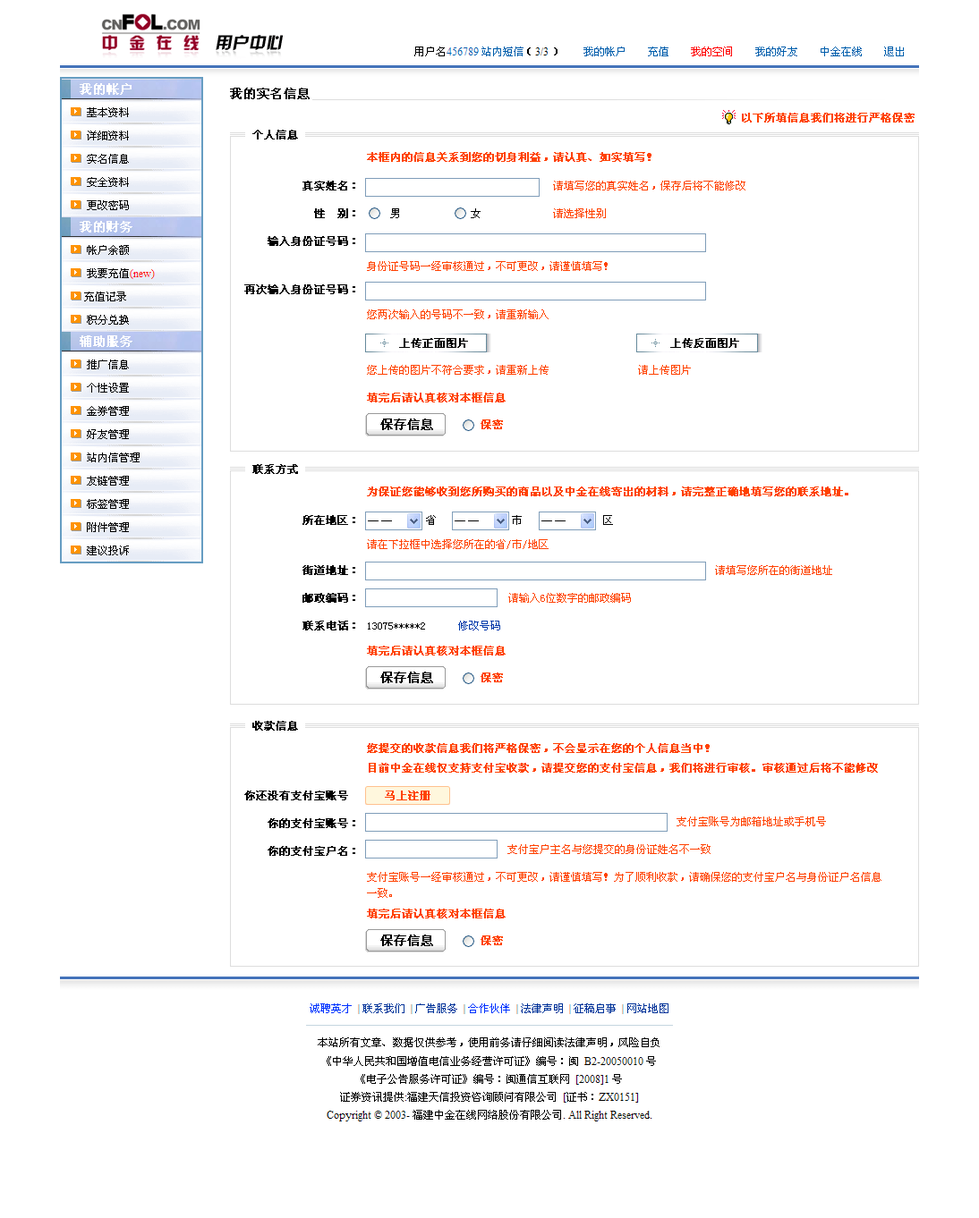
<style>
.page{position:relative;width:979px;height:1218px;background:#ffffff}
.page>*{position:absolute;margin:0}
.t1{font:12.5px "SimSun";color:#000000;font-weight:bold}
.t2{font:10.7px "SimSun";color:#ff4200;font-weight:bold}
.t3{font:10.7px "SimSun";color:#000000;font-weight:bold}
.t4{font:10.7px "SimSun";color:#000000}
.t5{font:10.7px/27.7px "SimSun";color:#000000;font-weight:bold}
.t6{font:10.7px "SimSun";color:#ff4200}
.t7{font:10.7px/27.7px "SimSun";color:#000000}
.t8{font:10.7px/27.7px "SimSun";color:#0038a9}
.t9{font:10.7px/16.1px "SimSun";color:#ff4200}
</style>
<div class="page">
<p class="t1" style="left:230px;top:88px;width:80px;height:11px">我的实名信息</p>
<p class="t2" style="left:742px;top:113px;width:172px;height:10px">以下所填信息我们将进行严格保密</p>
<p class="t3" style="left:252px;top:130px;width:46px;height:10px">个人信息</p>
<p class="t4" style="left:87px;top:154px;width:42px;height:10px">实名信息</p>
<p class="t2" style="left:367px;top:152px;width:284px;height:10px">本框内的信息关系到您的切身利益，请认真、如实填写！</p>
<p class="t5" style="left:267px;top:181px;width:88px;height:65px;text-align:right">真实姓名：<br>性　别：<br>输入身份证号码：</p>
<p class="t6" style="left:553px;top:181px;width:192px;height:10px">请填写您的真实姓名，保存后将不能修改</p>
<p class="t4" style="left:390px;top:208px;width:90px;height:10px">男             女</p>
<p class="t6" style="left:553px;top:208px;width:53px;height:10px">请选择性别</p>
<p class="t6" style="left:367px;top:261px;width:240px;height:10px">身份证号码一经审核通过，不可更改，请谨慎填写！</p>
<p class="t3" style="left:244px;top:284px;width:111px;height:10px">再次输入身份证号码：</p>
<p class="t6" style="left:367px;top:310px;width:181px;height:9px">您两次输入的号码不一致，请重新输入</p>
<p class="t3" style="left:399px;top:338px;width:69px;height:10px">上传正面图片</p>
<p class="t3" style="left:670px;top:338px;width:69px;height:10px">上传反面图片</p>
<p class="t6" style="left:367px;top:365px;width:181px;height:10px">您上传的图片不符合要求，请重新上传</p>
<p class="t6" style="left:638px;top:365px;width:53px;height:10px">请上传图片</p>
<p class="t2" style="left:367px;top:393px;width:138px;height:10px">填完后请认真核对本框信息</p>
<p class="t1" style="left:380px;top:419px;width:53px;height:11px">保存信息</p>
<p class="t2" style="left:480px;top:420px;width:23px;height:9px">保密</p>
<p class="t3" style="left:252px;top:464px;width:46px;height:10px">联系方式</p>
<p class="t2" style="left:367px;top:487px;width:481px;height:9px">为保证您能够收到您所购买的商品以及中金在线寄出的材料，请完整正确地填写您的联系地址。</p>
<p class="t3" style="left:302px;top:515px;width:53px;height:10px">所在地区：</p>
<p class="t4" style="left:426px;top:515px;width:187px;height:10px">省              市               区</p>
<p class="t6" style="left:367px;top:539px;width:181px;height:10px">请在下拉框中选择您所在的省/市/地区</p>
<p class="t5" style="left:302px;top:565px;width:198px;height:66px">街道地址：<br>邮政编码：<br>联系电话： <span class="t7">13075*****2      </span><span class="t8">修改号码</span></p>
<p class="t6" style="left:715px;top:565px;width:117px;height:10px">请填写您所在的街道地址</p>
<p class="t6" style="left:508px;top:593px;width:123px;height:10px">请输入6位数字的邮政编码</p>
<p class="t2" style="left:367px;top:646px;width:138px;height:10px">填完后请认真核对本框信息</p>
<p class="t1" style="left:380px;top:672px;width:53px;height:11px">保存信息</p>
<p class="t2" style="left:480px;top:673px;width:23px;height:10px">保密</p>
<p class="t3" style="left:252px;top:721px;width:46px;height:10px">收款信息</p>
<p class="t2" style="left:367px;top:743px;width:342px;height:10px">您提交的收款信息我们将严格保密，不会显示在您的个人信息当中！</p>
<p class="t2" style="left:369px;top:763px;width:509px;height:10px">目前中金在线仅支持支付宝收款，请提交您的支付宝信息，我们将进行审核。审核通过后将不能修改</p>
<p class="t3" style="left:244px;top:791px;width:104px;height:10px">你还没有支付宝账号</p>
<p class="t2" style="left:385px;top:791px;width:45px;height:10px">马上注册</p>
<p class="t5" style="left:267px;top:819px;width:88px;height:37px">你的支付宝账号：<br>你的支付宝户名：</p>
<p class="t6" style="left:676px;top:817px;width:150px;height:10px">支付宝账号为邮箱地址或手机号</p>
<p class="t6" style="left:507px;top:844px;width:203px;height:10px">支付宝户主名与您提交的身份证姓名不一致</p>
<p class="t9" style="left:367px;top:872px;width:514px;height:26px">支付宝账号一经审核通过，不可更改，请谨慎填写！为了顺利收款，请确保您的支付宝户名与身份证户名信息<br>一致。</p>
<p class="t2" style="left:367px;top:909px;width:138px;height:10px">填完后请认真核对本框信息</p>
<p class="t1" style="left:380px;top:935px;width:53px;height:11px">保存信息</p>
<p class="t2" style="left:480px;top:936px;width:23px;height:10px">保密</p>
</div>
